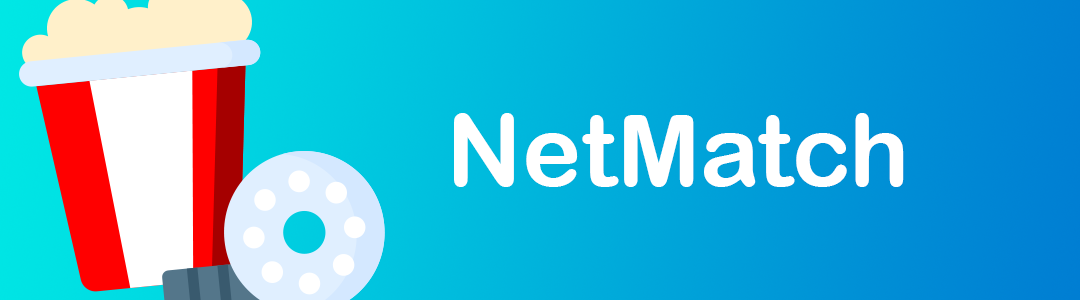
<style>
.page{position:relative;width:1080px;height:300px}
.page>*{position:absolute;margin:0}
.t1{font:100px "ArialRoundedMTBold";color:#ffffff}
</style>
<div class="page">
<p class="t1" style="left:454px;top:113px;width:450px;height:74px">NetMatch</p>
</div>
